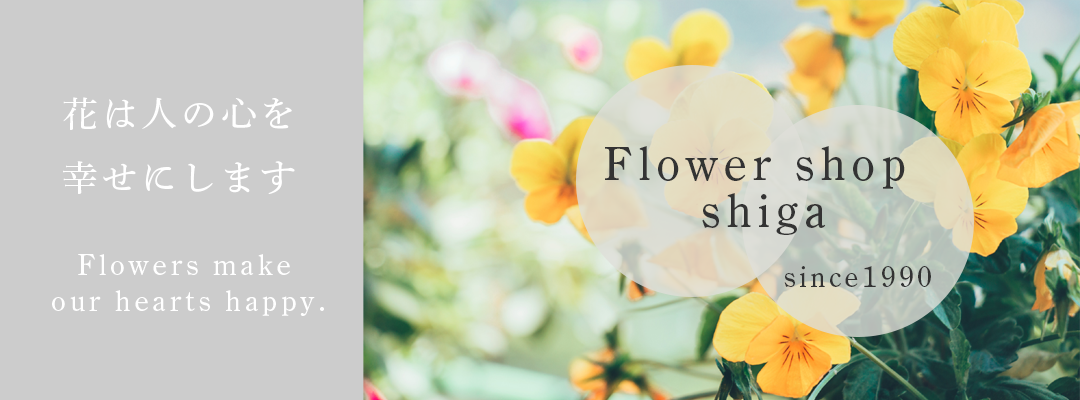
<style>
.page{position:relative;width:1080px;height:400px;background:#cccccc}
.page>*{position:absolute;margin:0}
.t1{font:36px/64px "DNPShueiMinPr6-M";letter-spacing:0.1em;color:#ffffff}
.t2{font:47.8px/47.8px "DNPShueiMinPr6-M";letter-spacing:0.1em;color:#333333}
.t3{font:30px/36px "DNPShueiMinPr6-M";letter-spacing:0.1em;color:#ffffff}
.t4{font:28.7px "DNPShueiMinPr6-M";letter-spacing:0.1em;color:#333333}
</style>
<div class="page">
<p class="t1" style="left:63px;top:97px;width:232px;height:97px;text-align:center">花は人の心を<br>幸せにします</p>
<p class="t2" style="left:605px;top:146px;width:300px;height:89px;text-align:center">Flower shop<br> shiga</p>
<p class="t3" style="left:52px;top:254px;width:272px;height:62px;text-align:center">Flowers make <br>our hearts happy.</p>
<p class="t4" style="left:784px;top:266px;width:147px;height:21px">since1990</p>
</div>
